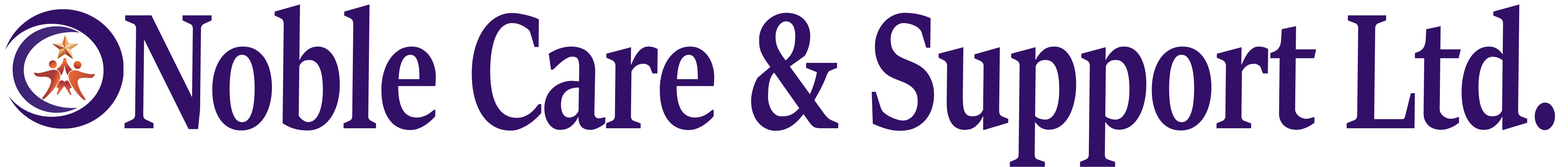
<style>
.page{position:relative;width:1568px;height:167px;background:#ffffff}
.page>*{position:absolute;margin:0}
.t1{font:184.2px "SitkaBanner-Bold";color:#331067;scale:0.73 1}
</style>
<div class="page">
<p class="t1" style="left:124px;top:4px;width:1431px;height:163px">Noble Care &amp; Support Ltd.</p>
</div>
